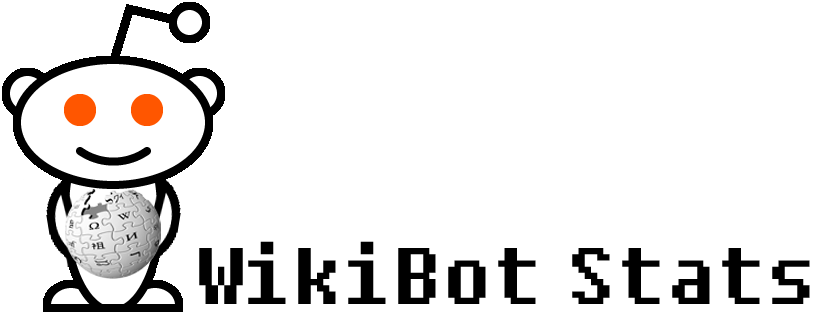
<style>
.page{position:relative;width:825px;height:315px;background:#ffffff}
.page>*{position:absolute;margin:0}
.t1{font:79.7px "Fixedsys";color:#000000}
</style>
<div class="page">
<p class="t1" style="left:199px;top:241px;width:337px;height:63px">WikiBot</p>
<p class="t1" style="left:572px;top:248px;width:238px;height:56px">Stats</p>
</div>
